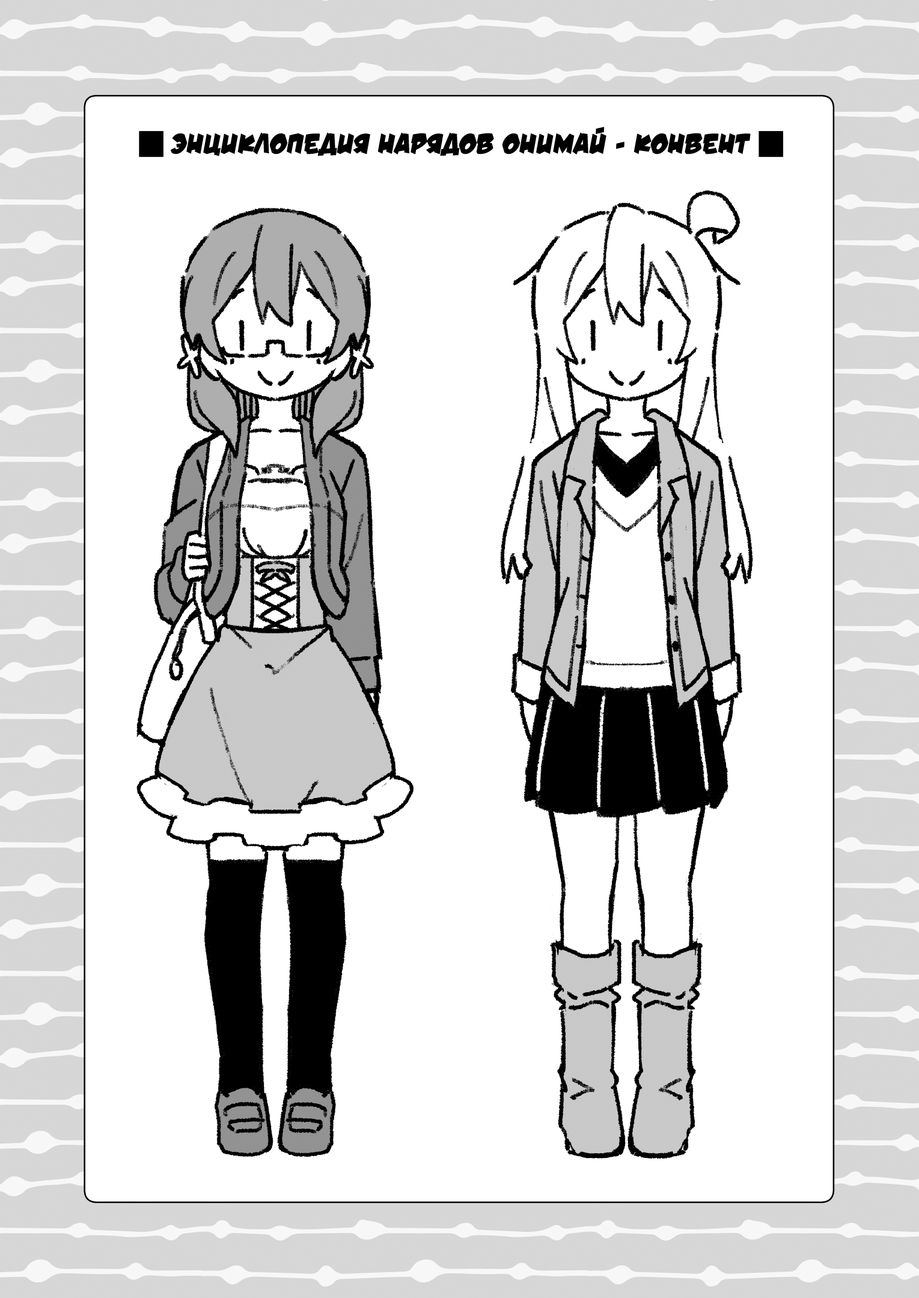
<style>
.page{position:relative;width:919px;height:1298px;background:#ffffff}
.page>*{position:absolute;margin:0}
.t1{font:28.8px "v_DamnNoisyKids";color:#000000;text-transform:uppercase}
</style>
<div class="page">
<p class="t1" style="left:171px;top:127px;width:579px;height:29px">Энциклопедия нарядов Онимай - конвент</p>
</div>
